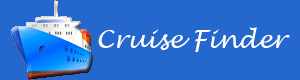
<style>
.page{position:relative;width:300px;height:80px;background:#2468cd}
.page>*{position:absolute;margin:0}
.t1{font:25px "LucidaHandwriting-Italic";color:#ffffff}
</style>
<div class="page">
<p class="t1" style="left:98px;top:27px;width:192px;height:25px">Cruise Finder</p>
</div>
